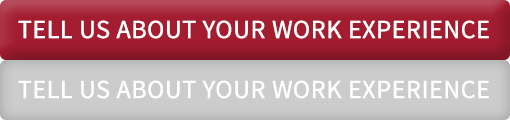
<style>
.page{position:relative;width:510px;height:120px}
.page>*{position:absolute;margin:0}
.t1{font:26px "SourceSansPro-Regular";color:#ffffff;text-transform:uppercase;font-weight:bold}
</style>
<div class="page">
<p class="t1" style="left:18px;top:20px;width:471px;height:19px">Tell Us About Your Work Experience</p>
<p class="t1" style="left:18px;top:80px;width:471px;height:19px">Tell Us About Your Work Experience</p>
</div>
